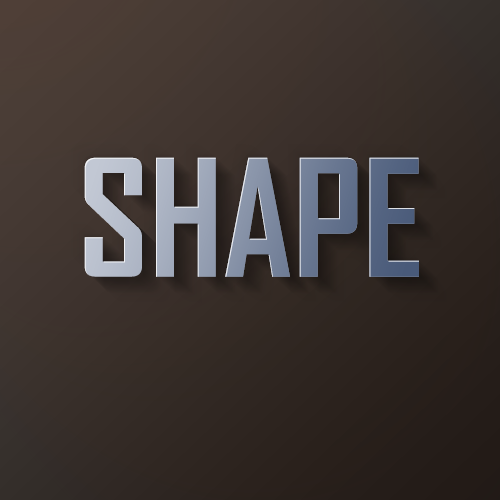
<style>
.page{position:relative;width:500px;height:500px}
.page>*{position:absolute;margin:0}
.t1{font:155.2px "AgencyFB-Bold"}
</style>
<div class="page">
<p class="t1" style="left:84px;top:157px;width:335px;height:120px">SHAPE</p>
</div>
